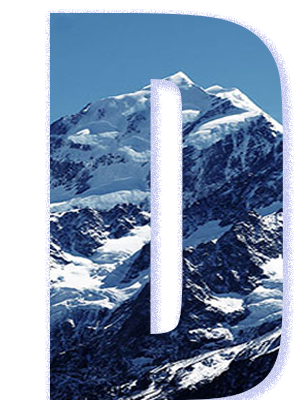
<style>
.page{position:relative;width:300px;height:400px;background:#ffffff}
.page>*{position:absolute;margin:0}
.t1{font:489px "Impact"}
</style>
<div class="page">
<p class="t1" style="left:50px;top:13px;width:233px;height:387px">D</p>
</div>
